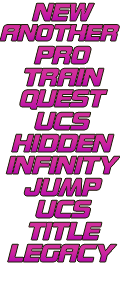
<style>
.page{position:relative;width:120px;height:286px;background:#ffffff}
.page>*{position:absolute;margin:0}
.t1{font:23.8px "Prime2-By-Ipe91";letter-spacing:-0.05em;color:#c8249d;scale:1.12 1}
.t2{font:40.8px "MyriadPro-BoldIt";letter-spacing:-0.15em;color:#c8249d;scale:1.12 1}
.t3{font:22.1px "Prime2-By-Ipe91";letter-spacing:-0.05em;color:#c9269c;scale:1.12 1}
.t4{font:40.8px "MyriadPro-BoldIt";letter-spacing:-0.15em;color:#c9269c;scale:1.12 1}
.t5{font:23.8px "Prime2-By-Ipe91";letter-spacing:-0.05em;color:#ca249c;scale:1.12 1}
.t6{font:40.8px "MyriadPro-BoldIt";letter-spacing:-0.15em;color:#ca249c;scale:1.12 1}
.t7{font:23.8px "Prime2-By-Ipe91";letter-spacing:-0.05em;color:#ca269c;scale:1.12 1}
.t8{font:40.8px "MyriadPro-BoldIt";letter-spacing:-0.15em;color:#ca269c;scale:1.12 1}
.t9{font:22.9px "Prime2-By-Ipe91";letter-spacing:-0.05em;color:#c7289c;scale:1.12 1}
.t10{font:40.8px "MyriadPro-BoldIt";letter-spacing:-0.15em;color:#c7289c;scale:1.12 1}
.t11{font:23.8px "Prime2-By-Ipe91";letter-spacing:-0.05em;color:#c1229d;scale:1.12 1}
.t12{font:40.8px "MyriadPro-BoldIt";letter-spacing:-0.15em;color:#c1229d;scale:1.12 1}
.t13{font:23.8px "Prime2-By-Ipe91";letter-spacing:-0.05em;color:#c5249d;scale:1.12 1}
.t14{font:40.8px "MyriadPro-BoldIt";letter-spacing:-0.15em;color:#c5249d;scale:1.12 1}
.t15{font:23.8px "Prime2-By-Ipe91";letter-spacing:-0.05em;color:#c5229e;scale:1.12 1}
.t16{font:40.8px "MyriadPro-BoldIt";letter-spacing:-0.15em;color:#c5229e;scale:1.12 1}
.t17{font:23.8px "Prime2-By-Ipe91";letter-spacing:-0.05em;color:#c5249c;scale:1.12 1}
.t18{font:40.8px "MyriadPro-BoldIt";letter-spacing:-0.15em;color:#c5249c;scale:1.12 1}
</style>
<div class="page">
<p class="t1" style="left:32px;top:3px;width:63px;height:18px"><span class="t2"><br></span>NEW</p>
<p class="t3" style="left:0px;top:24px;width:120px;height:17px"><span class="t4"><br></span>ANOTHER</p>
<p class="t5" style="left:34px;top:46px;width:57px;height:18px"><span class="t6"><br></span>PRO</p>
<p class="t7" style="left:24px;top:68px;width:80px;height:18px"><span class="t8"><br></span>TRAIN</p>
<p class="t9" style="left:19px;top:89px;width:89px;height:21px"><span class="t10"><br></span>QUEST</p>
<p class="t11" style="left:34px;top:112px;width:57px;height:18px"><span class="t12"><br></span>UCS</p>
<p class="t13" style="left:11px;top:134px;width:103px;height:18px"><span class="t14"><br></span>HIDDEN</p>
<p class="t7" style="left:6px;top:156px;width:115px;height:18px"><span class="t8"><br></span>INFINITY</p>
<p class="t15" style="left:24px;top:178px;width:78px;height:18px"><span class="t16"><br></span>JUMP</p>
<p class="t11" style="left:35px;top:200px;width:57px;height:18px"><span class="t12"><br></span>UCS</p>
<p class="t17" style="left:29px;top:222px;width:73px;height:18px"><span class="t18"><br></span>TITLE</p>
<p class="t17" style="left:7px;top:244px;width:110px;height:18px"><span class="t18"><br></span>LEGACY</p>
</div>
